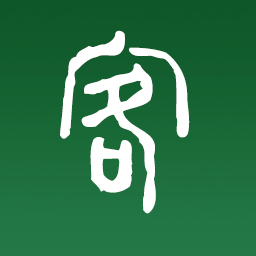
<style>
.page{position:relative;width:256px;height:256px}
.page>*{position:absolute;margin:0}
.t1{font:200px "EBAS";color:#ffffff}
</style>
<div class="page">
<p class="t1" style="left:60px;top:30px;width:130px;height:184px">客</p>
</div>
